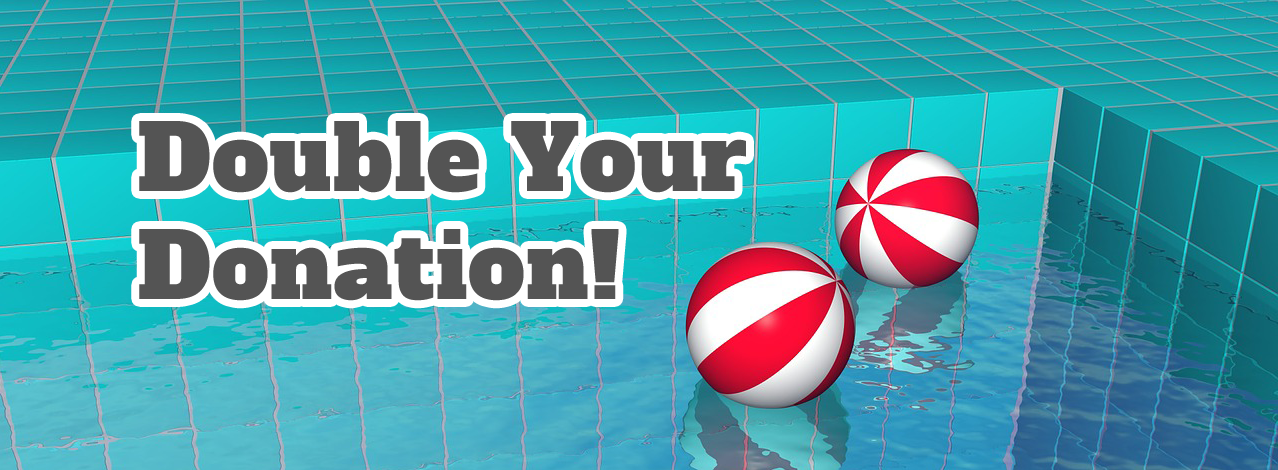
<style>
.page{position:relative;width:1278px;height:470px}
.page>*{position:absolute;margin:0}
.t1{font:90px "AlfaSlabOne-Regular";letter-spacing:0.018em;color:#545454}
</style>
<div class="page">
<p class="t1" style="left:139px;top:121px;width:607px;height:180px">Double Your<br>Donation!</p>
</div>
